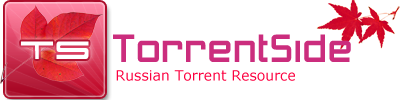
<style>
.page{position:relative;width:400px;height:100px;background:#ffffff}
.page>*{position:absolute;margin:0}
.t1{font:36px "911Porscha";color:#ffffff}
.t2{font:36px "ZeroThrees";color:#cb2d7d;font-weight:bold}
.t3{font:14px "Verdana";color:#fc003f}
</style>
<div class="page">
<p class="t1" style="left:21px;top:41px;width:68px;height:18px">TS</p>
<p class="t2" style="left:113px;top:34px;width:238px;height:28px">TorrentSide</p>
<p class="t3" style="left:116px;top:70px;width:179px;height:11px">Russian Torrent Resource</p>
</div>
